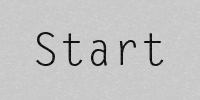
<style>
.page{position:relative;width:200px;height:100px;background:#c8c8c8}
.page>*{position:absolute;margin:0}
.t1{font:45px "LetterGothicStd";color:#121212}
</style>
<div class="page">
<p class="t1" style="left:36px;top:32px;width:128px;height:34px">Start</p>
</div>
